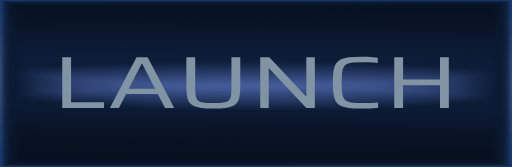
<style>
.page{position:relative;width:512px;height:167px}
.page>*{position:absolute;margin:0}
.t1{font:73.7px "SairaRoman-Regular";color:#8094a4;scale:1.39 1}
</style>
<div class="page">
<p class="t1" style="left:62px;top:56px;width:387px;height:53px">LAUNCH</p>
</div>
